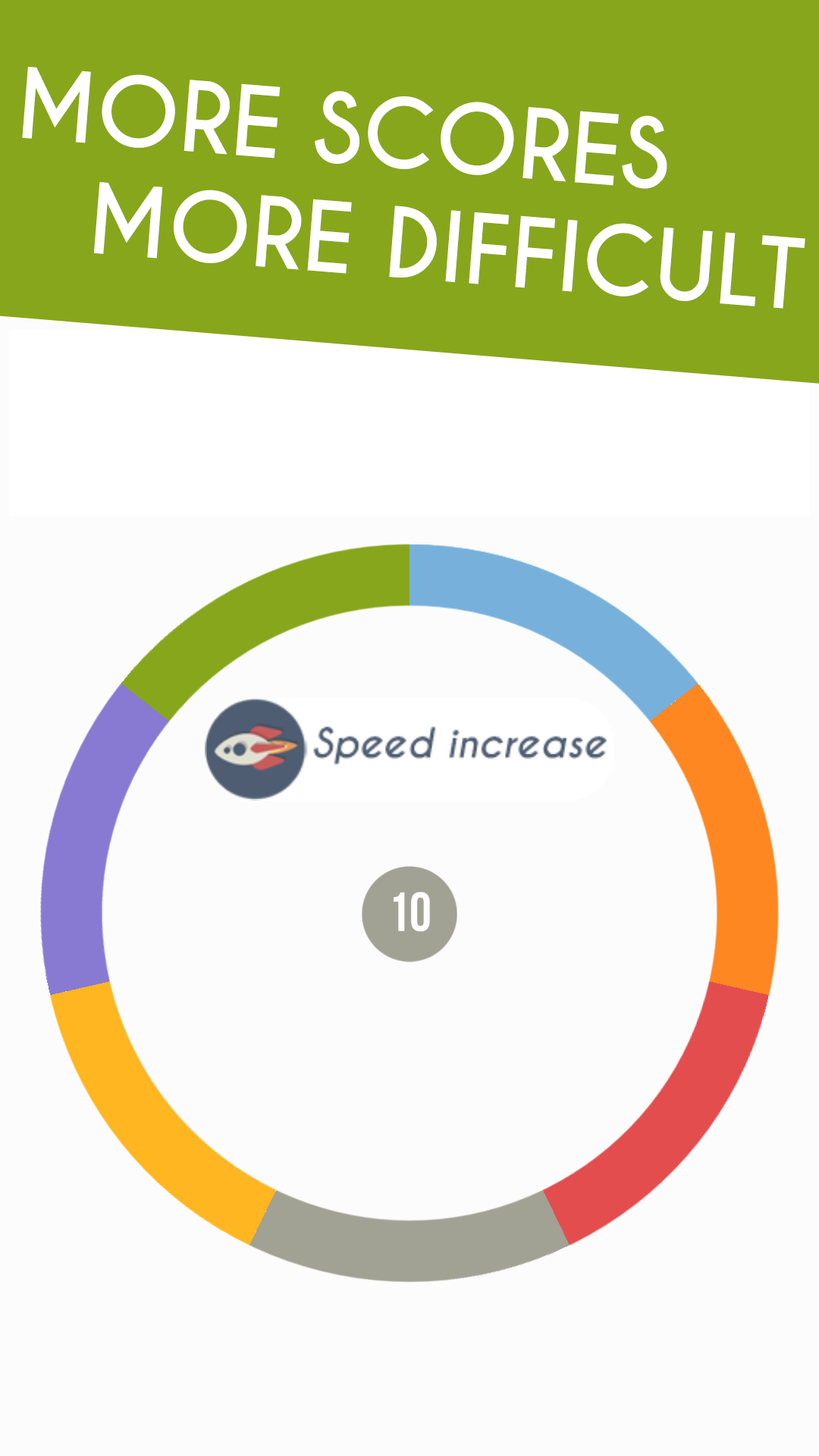
<style>
.page{position:relative;width:819px;height:1456px;background:#fcfcfc}
.page>*{position:absolute;margin:0}
.t1{font:91px "CaviarDreams-Bold";color:#ffffff}
</style>
<div class="page">
<p class="t1" style="left:22px;top:67px;width:783px;height:242px;rotate:5deg">MORE SCORES <br>   MORE DIFFICULT</p>
</div>
